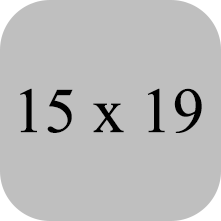
<style>
.page{position:relative;width:221px;height:221px;background:#bfbfbf}
.page>*{position:absolute;margin:0}
.t1{font:63.9px "TimesNewRomanPSMT";color:#000000}
</style>
<div class="page">
<p class="t1" style="left:20px;top:88px;width:182px;height:45px">15 х 19</p>
</div>
